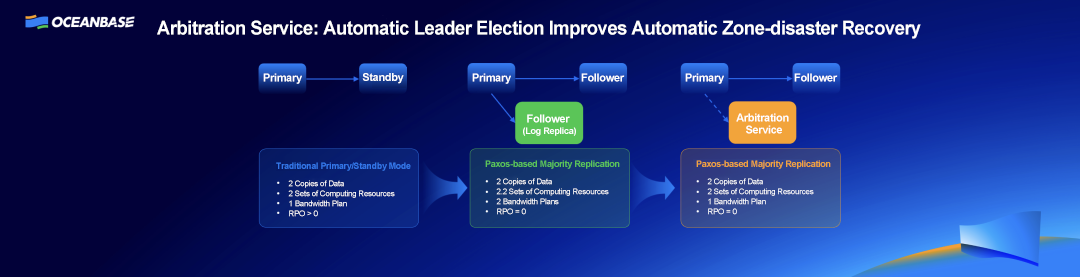
<style>
.page{position:relative;width:1080px;height:277px;background:#020139}
.page>*{position:absolute;margin:0}
.t1{font:19px "Arial-BoldMT";letter-spacing:-0.03em;color:#ffffff}
.t2{font:11px "Arial-BoldMT";letter-spacing:-0.03em;color:#ffffff}
.t3{font:11px/12px "Arial-BoldMT";letter-spacing:-0.03em;color:#ffffff}
.t4{font:9px "Arial-BoldMT";letter-spacing:-0.03em;color:#ffffff}
.t5{font:9px "Arial-BoldMT";letter-spacing:-0.03em;color:#5bc558}
.t6{font:9px "Arial-BoldMT";letter-spacing:-0.03em;color:#f2a43b}
.t7{font:9px "Arial-BoldMT";letter-spacing:-0.03em;color:#3376e9}
.t8{font:8px/10px "ArialMT";letter-spacing:-0.03em;color:#ffffff}
</style>
<div class="page">
<p class="t1" style="left:157px;top:20px;width:764px;height:19px">Arbitration Service: Automatic Leader Election Improves Automatic Zone-disaster Recovery</p>
<p class="t2" style="left:263px;top:73px;width:39px;height:11px">Primary</p>
<p class="t2" style="left:362px;top:73px;width:42px;height:11px">Standby</p>
<p class="t2" style="left:472px;top:73px;width:39px;height:11px">Primary</p>
<p class="t2" style="left:581px;top:73px;width:44px;height:9px">Follower</p>
<p class="t2" style="left:685px;top:73px;width:39px;height:11px">Primary</p>
<p class="t2" style="left:794px;top:73px;width:44px;height:9px">Follower</p>
<p class="t3" style="left:736px;top:113px;width:53px;height:21px;text-align:center">Arbitration <br>Service</p>
<p class="t2" style="left:527px;top:114px;width:43px;height:9px">Follower</p>
<p class="t4" style="left:523px;top:127px;width:53px;height:9px">(Log Replica)</p>
<p class="t5" style="left:485px;top:160px;width:135px;height:9px">Paxos-based Majority Replication</p>
<p class="t6" style="left:696px;top:160px;width:135px;height:9px">Paxos-based Majority Replication</p>
<p class="t7" style="left:276px;top:162px;width:135px;height:9px">Traditional Primary/Standby Mode</p>
<p class="t8" style="left:288px;top:180px;width:107px;height:37px">2 Copies of Data<br>2 Sets of Computing Resources<br>1 Bandwidth Plan<br>RPO &gt; 0</p>
<p class="t8" style="left:496px;top:178px;width:113px;height:37px">2 Copies of Data<br>2.2 Sets of Computing Resources<br>2 Bandwidth Plans<br>RPO = 0</p>
<p class="t8" style="left:707px;top:178px;width:107px;height:37px">2 Copies of Data<br>2 Sets of Computing Resources<br>1 Bandwidth Plan<br>RPO = 0</p>
</div>
